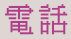
<style>
.page{position:relative;width:71px;height:39px;background:#ded6d2}
.page>*{position:absolute;margin:0}
.t1{font:30px "KH-Dot-kagurazaka-16";letter-spacing:0.14em;color:#c02f7a}
</style>
<div class="page">
<p class="t1" style="left:4px;top:4px;width:64px;height:31px">電話</p>
</div>
